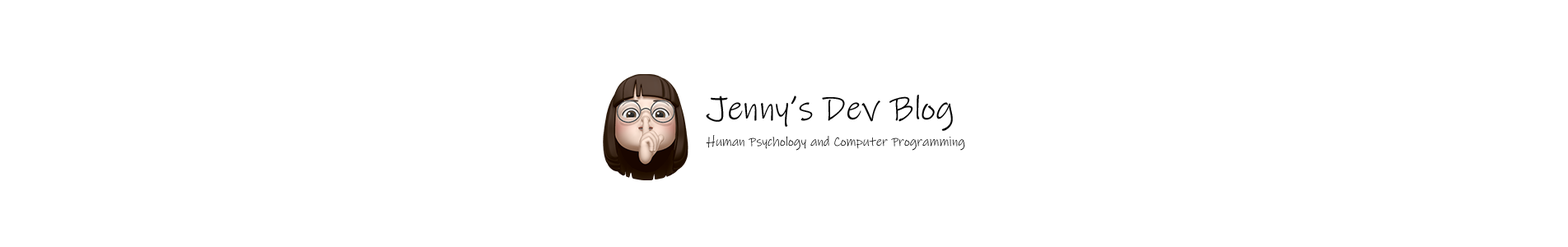
<style>
.page{position:relative;width:1568px;height:247px;background:#ffffff}
.page>*{position:absolute;margin:0}
.t1{font:34.6px "InkFree";color:#000000}
.t2{font:13.2px "InkFree";color:#000000}
</style>
<div class="page">
<p class="t1" style="left:706px;top:95px;width:247px;height:36px">Jenny’s Dev Blog</p>
<p class="t2" style="left:706px;top:135px;width:259px;height:16px">Human Psychology and Computer Programming</p>
</div>
